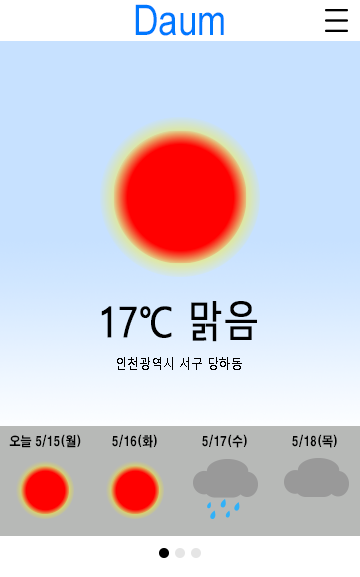
<style>
.page{position:relative;width:360px;height:577px;background:#c7e1ff}
.page>*{position:absolute;margin:0}
.t1{font:42.4px "ArialMT";color:#0078ff;scale:0.83 1}
.t2{font:42.4px "MalgunGothic";color:#000000;font-weight:bold;scale:0.83 1}
.t3{font:14.4px "MalgunGothic";color:#000000;scale:0.83 1}
.t4{font:13.2px "H2gtrE";color:#000000;scale:0.83 1}
</style>
<div class="page">
<p class="t1" style="left:135px;top:4px;width:89px;height:32px">Daum</p>
<p class="t2" style="left:101px;top:301px;width:156px;height:41px">17℃ 맑음</p>
<p class="t3" style="left:117px;top:357px;width:125px;height:13px">인천광역시 서구 당하동</p>
<p class="t4" style="left:9px;top:434px;width:72px;height:14px">오늘 5/15(월)</p>
<p class="t4" style="left:112px;top:434px;width:45px;height:14px">5/16(화)</p>
<p class="t4" style="left:202px;top:434px;width:45px;height:14px">5/17(수)</p>
<p class="t4" style="left:292px;top:434px;width:45px;height:14px">5/18(목)</p>
</div>
